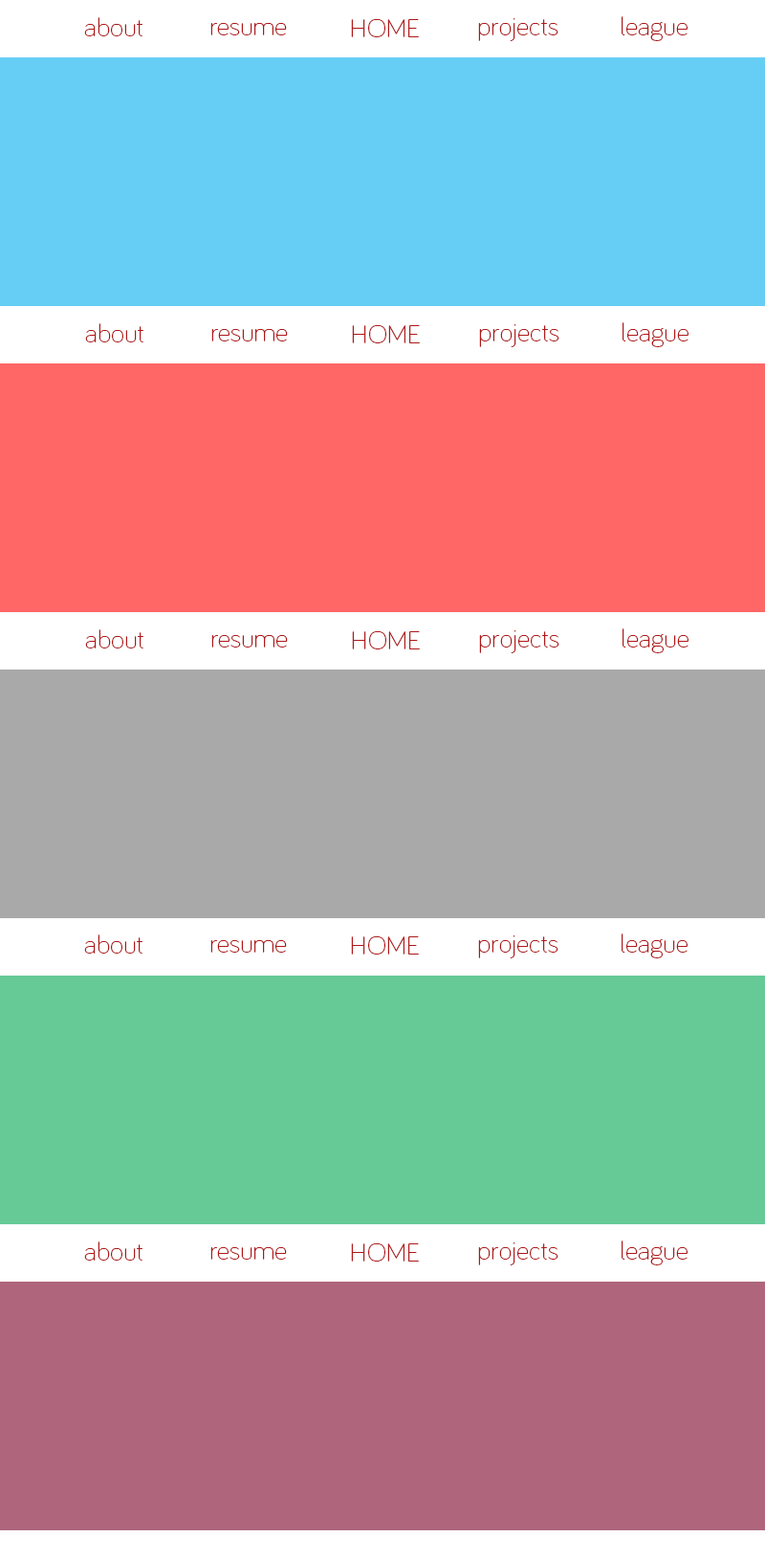
<style>
.page{position:relative;width:765px;height:1559px}
.page>*{position:absolute;margin:0}
.t1{font:26.8px "Bariol-Light";color:#ae1718}
</style>
<div class="page">
<p class="t1" style="left:84px;top:17px;width:58px;height:19px">about</p>
<p class="t1" style="left:622px;top:16px;width:66px;height:25px">league</p>
<p class="t1" style="left:210px;top:23px;width:77px;height:12px">resume</p>
<p class="t1" style="left:351px;top:19px;width:68px;height:18px">HOME</p>
<p class="t1" style="left:478px;top:18px;width:80px;height:23px">projects</p>
<p class="t1" style="left:85px;top:323px;width:58px;height:19px">about</p>
<p class="t1" style="left:211px;top:329px;width:77px;height:12px">resume</p>
<p class="t1" style="left:352px;top:325px;width:68px;height:18px">HOME</p>
<p class="t1" style="left:479px;top:324px;width:80px;height:23px">projects</p>
<p class="t1" style="left:623px;top:322px;width:66px;height:25px">league</p>
<p class="t1" style="left:85px;top:629px;width:58px;height:19px">about</p>
<p class="t1" style="left:623px;top:628px;width:66px;height:25px">league</p>
<p class="t1" style="left:211px;top:635px;width:77px;height:12px">resume</p>
<p class="t1" style="left:352px;top:631px;width:68px;height:18px">HOME</p>
<p class="t1" style="left:479px;top:630px;width:80px;height:23px">projects</p>
<p class="t1" style="left:84px;top:934px;width:58px;height:19px">about</p>
<p class="t1" style="left:210px;top:940px;width:77px;height:12px">resume</p>
<p class="t1" style="left:351px;top:936px;width:68px;height:18px">HOME</p>
<p class="t1" style="left:478px;top:935px;width:80px;height:23px">projects</p>
<p class="t1" style="left:622px;top:933px;width:66px;height:25px">league</p>
<p class="t1" style="left:84px;top:1241px;width:58px;height:19px">about</p>
<p class="t1" style="left:622px;top:1240px;width:66px;height:25px">league</p>
<p class="t1" style="left:210px;top:1247px;width:77px;height:12px">resume</p>
<p class="t1" style="left:351px;top:1243px;width:68px;height:18px">HOME</p>
<p class="t1" style="left:478px;top:1242px;width:80px;height:23px">projects</p>
</div>
